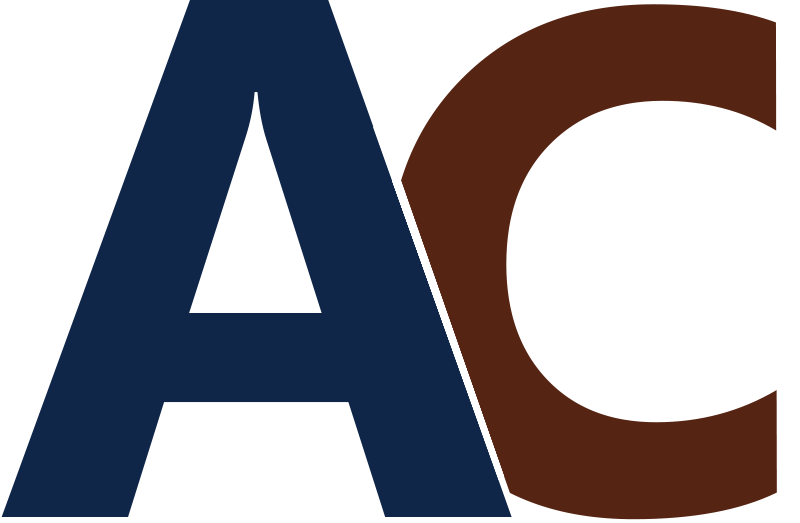
<style>
.page{position:relative;width:800px;height:523px;background:#ffffff}
.page>*{position:absolute;margin:0}
.t1{font:738.8px "Ebrima-Bold";color:#0f2649}
.t2{font:711px "Ebrima-Bold";color:#562413}
</style>
<div class="page">
<p class="t1" style="left:1px;top:0px;width:512px;height:517px">A</p>
<p class="t2" style="left:388px;top:4px;width:389px;height:516px">C</p>
</div>
